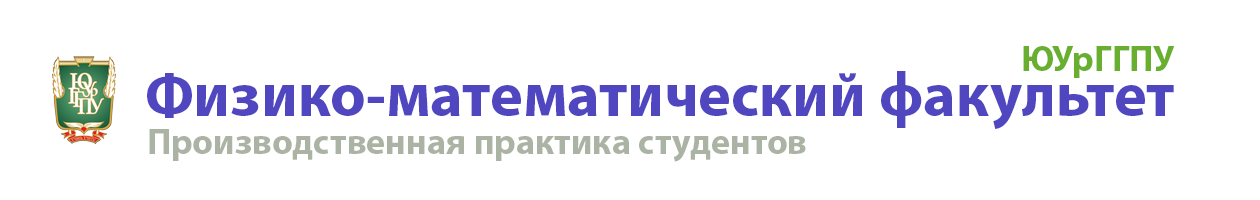
<style>
.page{position:relative;width:1260px;height:200px;background:#ffffff}
.page>*{position:absolute;margin:0}
.t1{font:36px "MyriadPro-Bold";color:#68ae2f}
.t2{font:62px "MyriadPro-Bold";color:#5046c0}
.t3{font:36px "MyriadPro-Bold";color:#abb4a4}
</style>
<div class="page">
<p class="t1" style="left:1023px;top:46px;width:152px;height:32px">ЮУрГГПУ</p>
<p class="t2" style="left:147px;top:71px;width:1027px;height:58px">Физико-математический факультет</p>
<p class="t3" style="left:149px;top:129px;width:657px;height:33px">Производственная практика студентов</p>
</div>
